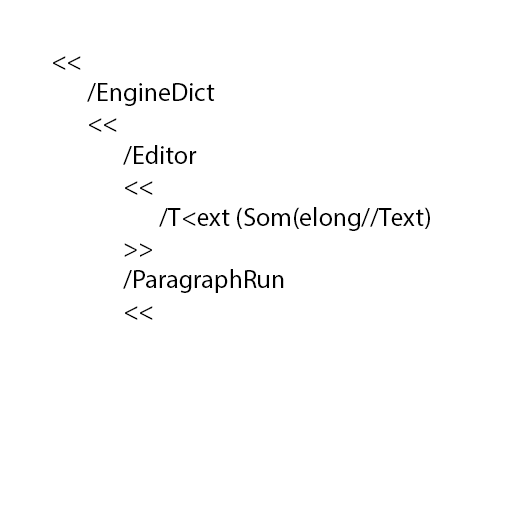
<style>
.page{position:relative;width:512px;height:512px;background:#ffffff}
.page>*{position:absolute;margin:0}
.t1{font:26px "MyriadPro-Regular";color:#000000}
</style>
<div class="page">
<p class="t1" style="left:53px;top:56px;width:377px;height:264px">&lt;&lt;<br> /EngineDict<br> &lt;&lt;<br>  /Editor<br>  &lt;&lt;<br>   /T&lt;ext (Som(elong//Text)<br>  &gt;&gt;<br>  /ParagraphRun<br>  &lt;&lt;</p>
</div>
